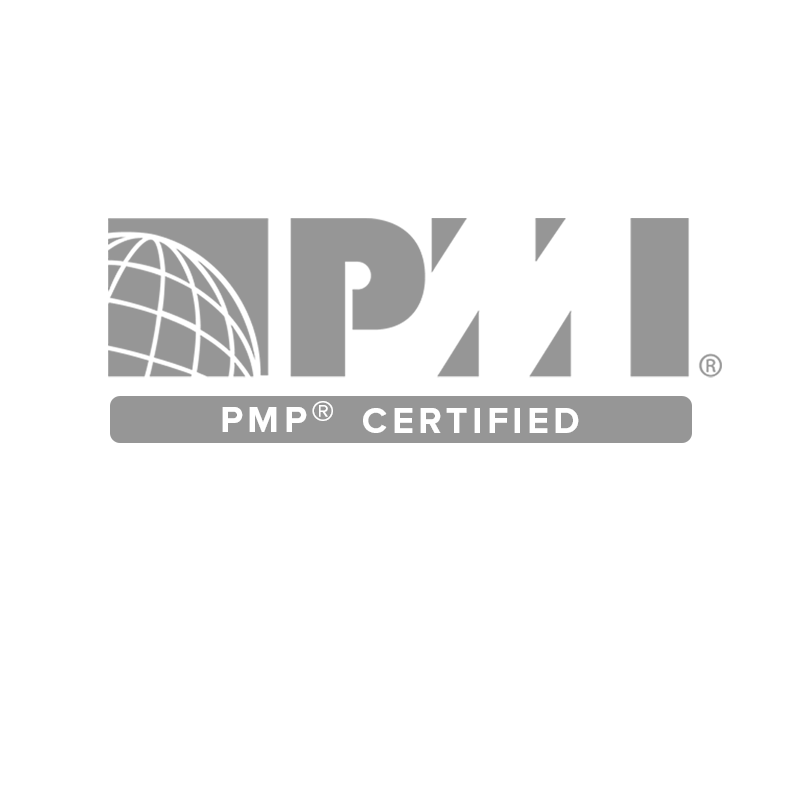
<style>
.page{position:relative;width:800px;height:800px;background:#ffffff}
.page>*{position:absolute;margin:0}
.t1{font:47.4px "ProximaNova-Bold";letter-spacing:0.12em;color:#ffffff}
.t2{font:37px "ProximaNova-Bold";letter-spacing:0.12em;color:#ffffff}
</style>
<div class="page">
<p class="t1" style="left:312px;top:401px;width:21px;height:20px">®</p>
<p class="t2" style="left:222px;top:407px;width:85px;height:25px">PMP</p>
<p class="t2" style="left:363px;top:408px;width:216px;height:25px">CERTIFIED</p>
</div>
